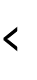
<style>
.page{position:relative;width:37px;height:80px;background:#ffffff}
.page>*{position:absolute;margin:0}
.t1{font:55.7px "Lato-Regular";color:#000000;text-transform:uppercase;scale:0.64 1}
</style>
<div class="page">
<p class="t1" style="left:3px;top:26px;width:15px;height:26px">&lt;</p>
</div>
